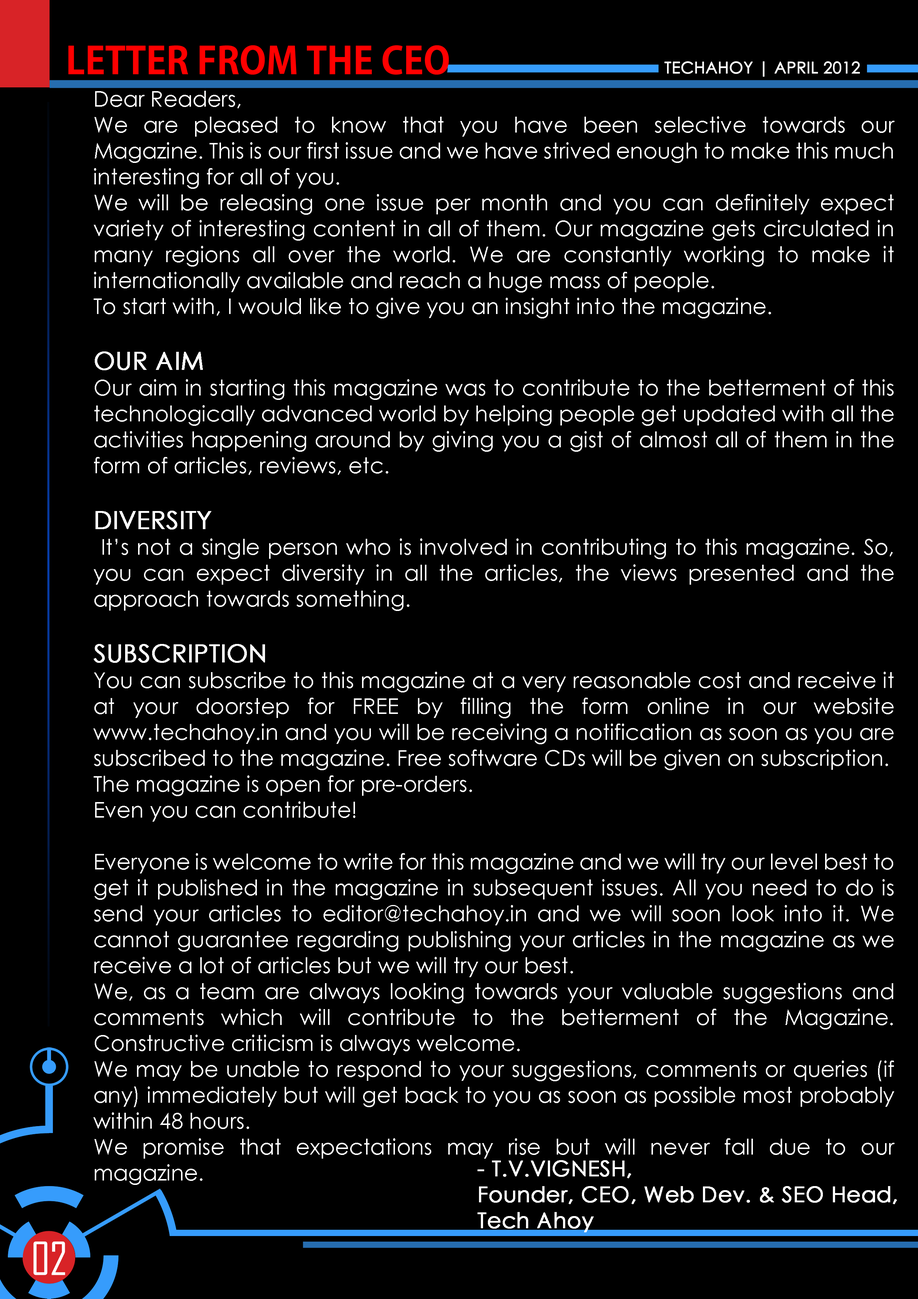
<style>
.page{position:relative;width:918px;height:1299px;background:#000000}
.page>*{position:absolute;margin:0}
.t1{font:37px "AdobeGothicStd-Bold";color:#ff0000;text-transform:uppercase}
.t2{font:16px "CenturyGothic";color:#ffffff;text-transform:uppercase;font-weight:bold}
.t3{font:21.6px "CenturyGothic";color:#ffffff}
.t4{font:24.7px "CenturyGothic";color:#ffffff;font-weight:bold}
.t5{font:21.6px "CenturyGothic";color:#ffffff;font-weight:bold}
.t6{font:43.7px "AgencyFB-Reg";color:#ffffff;text-transform:uppercase}
</style>
<div class="page">
<p class="t1" style="left:68px;top:45px;width:381px;height:30px">LETTER FROM THE CEO</p>
<p class="t2" style="left:665px;top:61px;width:195px;height:16px">techahoy | APRIL 2012</p>
<p class="t3" style="left:93px;top:91px;width:802px;height:1094px;text-align:justify">Dear Readers,<br>We are pleased to know that you have been selective towards our Magazine. This is our first issue and we have strived enough to make this much interesting for all of you.<br>We will be releasing one issue per month and you can definitely expect variety of interesting content in all of them. Our magazine gets circulated in many regions all over the world. We are constantly working to make it internationally available and reach a huge mass of people. <br>To start with, I would like to give you an insight into the magazine.<br><br><span class="t4">OUR AIM<br></span>Our aim in starting this magazine was to contribute to the betterment of this technologically advanced world by helping people get updated with all the activities happening around by giving you a gist of almost all of them in the form of articles, reviews, etc.<br><br><span class="t4">DIVERSITY<br></span> It’s not a single person who is involved in contributing to this magazine. So, you can expect diversity in all the articles, the views presented and the approach towards something.<br><br><span class="t4">SUBSCRIPTION<br></span>You can subscribe to this magazine at a very reasonable cost and receive it at your doorstep for FREE by filling the form online in our website www.techahoy.in and you will be receiving a notification as soon as you are subscribed to the magazine. Free software CDs will be given on subscription.<br>The magazine is open for pre-orders.<br>Even you can contribute!<br><br>Everyone is welcome to write for this magazine and we will try our level best to get it published in the magazine in subsequent issues. All you need to do is send your articles to editor@techahoy.in and we will soon look into it. We cannot guarantee regarding publishing your articles in the magazine as we receive a lot of articles but we will try our best.<br>We, as a team are always looking towards your valuable suggestions and comments which will contribute to the betterment of the Magazine. Constructive criticism is always welcome.<br>We may be unable to respond to your suggestions, comments or queries (if any) immediately but will get back to you as soon as possible most probably within 48 hours.<br>We promise that expectations may rise but will never fall due to our magazine.</p>
<p class="t5" style="left:478px;top:1160px;width:419px;height:72px;text-align:justify">- T.V.VIGNESH,<br>Founder, CEO, Web Dev. &amp; SEO Head,<br>Tech Ahoy</p>
<p class="t6" style="left:33px;top:1241px;width:32px;height:34px">02</p>
</div>
